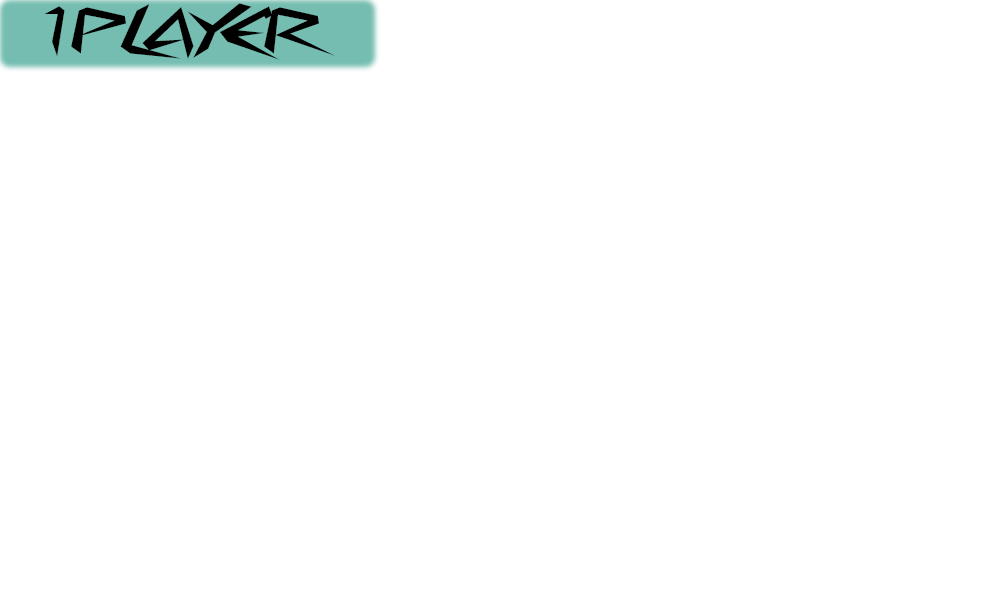
<style>
.page{position:relative;width:1001px;height:595px;background:#ffffff}
.page>*{position:absolute;margin:0}
.t1{font:60px "CyberwayRiders";color:#000000}
</style>
<div class="page">
<p class="t1" style="left:44px;top:3px;width:291px;height:57px">1 PLAYER</p>
</div>
